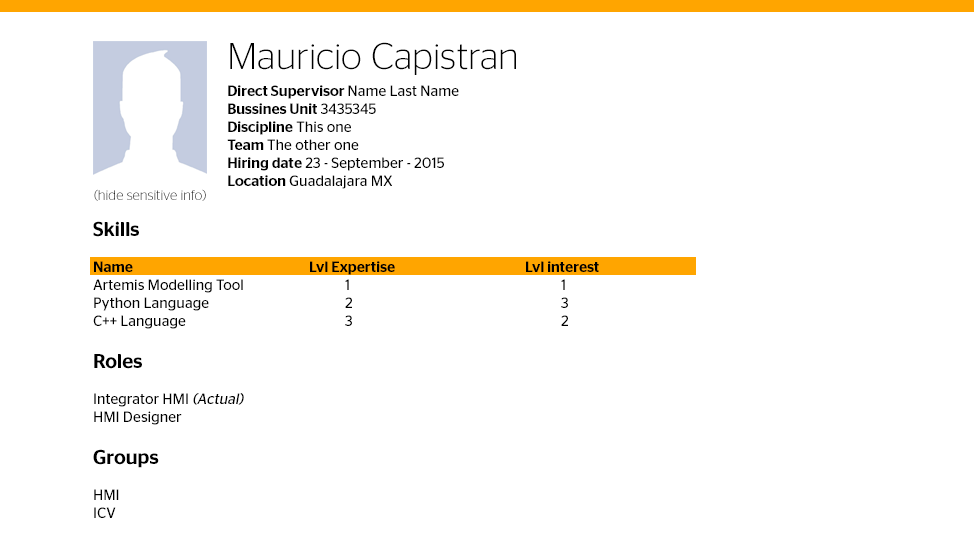
<style>
.page{position:relative;width:974px;height:551px;background:#ffffff}
.page>*{position:absolute;margin:0}
.t1{font:37.1px "ContinentalStagSans-Light";color:#000000}
.t2{font:15px "ContinentalStagSans-Book";color:#000000}
.t3{font:15px "ContinentalStagSans-Medium";color:#000000}
.t4{font:14px "ContinentalStagSans-Light"}
.t5{font:20px "ContinentalStagSans-Medium";color:#000000}
.t6{font:15px "ContinentalStagSans-Book";color:#000000;font-style:italic}
</style>
<div class="page">
<p class="t1" style="left:230px;top:42px;width:286px;height:33px">Mauricio Capistran</p>
<p class="t2" style="left:227px;top:85px;width:232px;height:104px"><span class="t3">Direct Supervisor </span>Name Last Name<br><span class="t3">Bussines Unit</span> 3435345<br><span class="t3">Discipline</span> This one<br><span class="t3">Team </span>The other one<br><span class="t3">Hiring date</span> 23 - September - 2015<br><span class="t3">Location</span> Guadalajara MX</p>
<p class="t4" style="left:94px;top:189px;width:112px;height:12px">(hide sensitive info)</p>
<p class="t2" style="left:93px;top:221px;width:506px;height:297px"><span class="t5">Skills<br><br></span><span class="t3">Name     Lvl Expertise     Lvl interest<br></span>Artemis Modelling Tool   1      1<br>Python Language    2      3<br>C++ Language     3      2<br><br><span class="t5">Roles<br><br></span>Integrator HMI <span class="t6">(Actual)<br></span>HMI Designer<br> <br><span class="t5">Groups<br><br></span>HMI<br>ICV</p>
</div>
